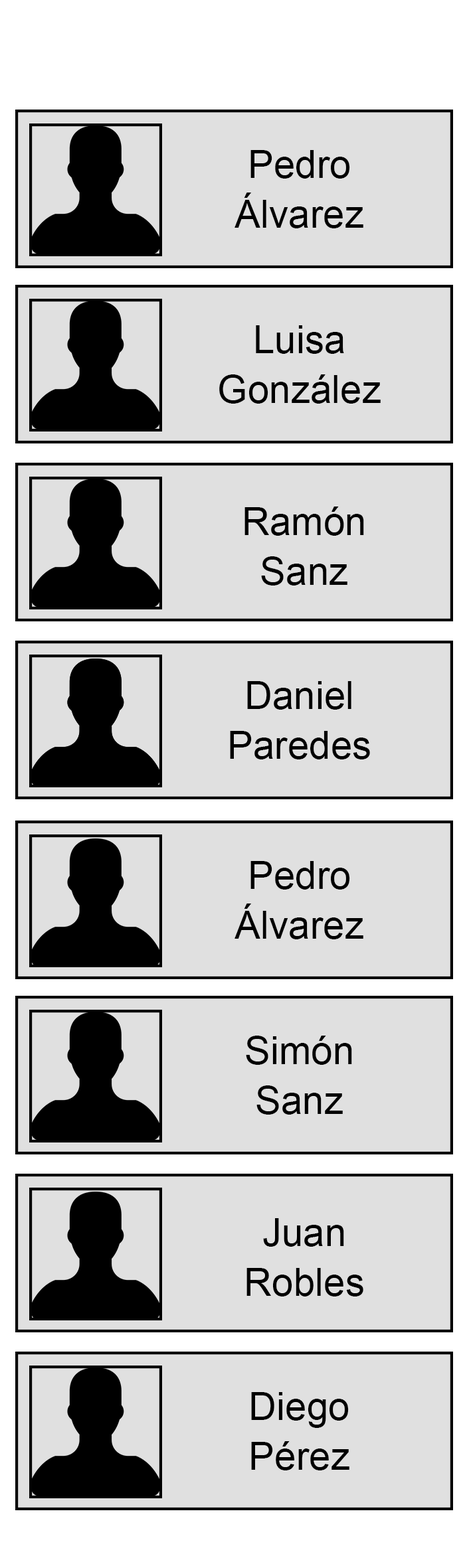
<style>
.page{position:relative;width:471px;height:1568px;background:#e0e0e0}
.page>*{position:absolute;margin:0}
.t1{font:38.7px/49.8px "ArialMT";color:#000000}
.t2{font:38.7px/276.6px "ArialMT";color:#000000}
</style>
<div class="page">
<p class="t1" style="left:234px;top:150px;width:129px;height:78px;text-align:center"><span class="t2">Pedro<br></span>Álvarez</p>
<p class="t1" style="left:219px;top:325px;width:161px;height:79px;text-align:center"><span class="t2">Luisa</span><br>González</p>
<p class="t2" style="left:244px;top:507px;width:120px;height:79px;text-align:center">Ramón<span class="t1"><br>Sanz</span></p>
<p class="t1" style="left:230px;top:681px;width:140px;height:78px;text-align:center"><span class="t2">Daniel</span><br>Paredes</p>
<p class="t1" style="left:234px;top:861px;width:129px;height:78px;text-align:center"><span class="t2">Pedro<br></span>Álvarez</p>
<p class="t2" style="left:246px;top:1036px;width:106px;height:79px;text-align:center">Simón<span class="t1"><br>Sanz</span></p>
<p class="t1" style="left:246px;top:1218px;width:117px;height:78px;text-align:center"><span class="t2">Juan</span><br>Robles</p>
<p class="t2" style="left:251px;top:1392px;width:98px;height:78px;text-align:center">Diego<span class="t1"><br>Pérez</span></p>
</div>
